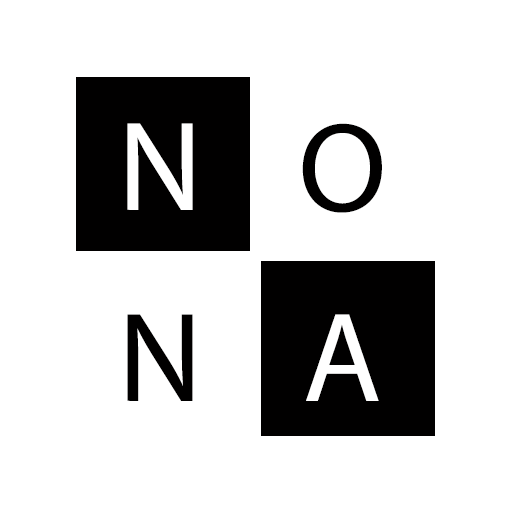
<style>
.page{position:relative;width:511px;height:511px;background:#ffffff}
.page>*{position:absolute;margin:0}
.t1{font:128px "MyriadPro-Regular";letter-spacing:0.05em;color:#ffffff;text-transform:uppercase}
.t2{font:128px "MyriadPro-Regular";letter-spacing:0.05em;color:#010000;text-transform:uppercase}
</style>
<div class="page">
<p class="t1" style="left:127px;top:123px;width:66px;height:87px">N</p>
<p class="t2" style="left:302px;top:123px;width:80px;height:90px">O</p>
<p class="t2" style="left:127px;top:314px;width:66px;height:87px">N</p>
<p class="t1" style="left:306px;top:314px;width:73px;height:87px">A</p>
</div>
